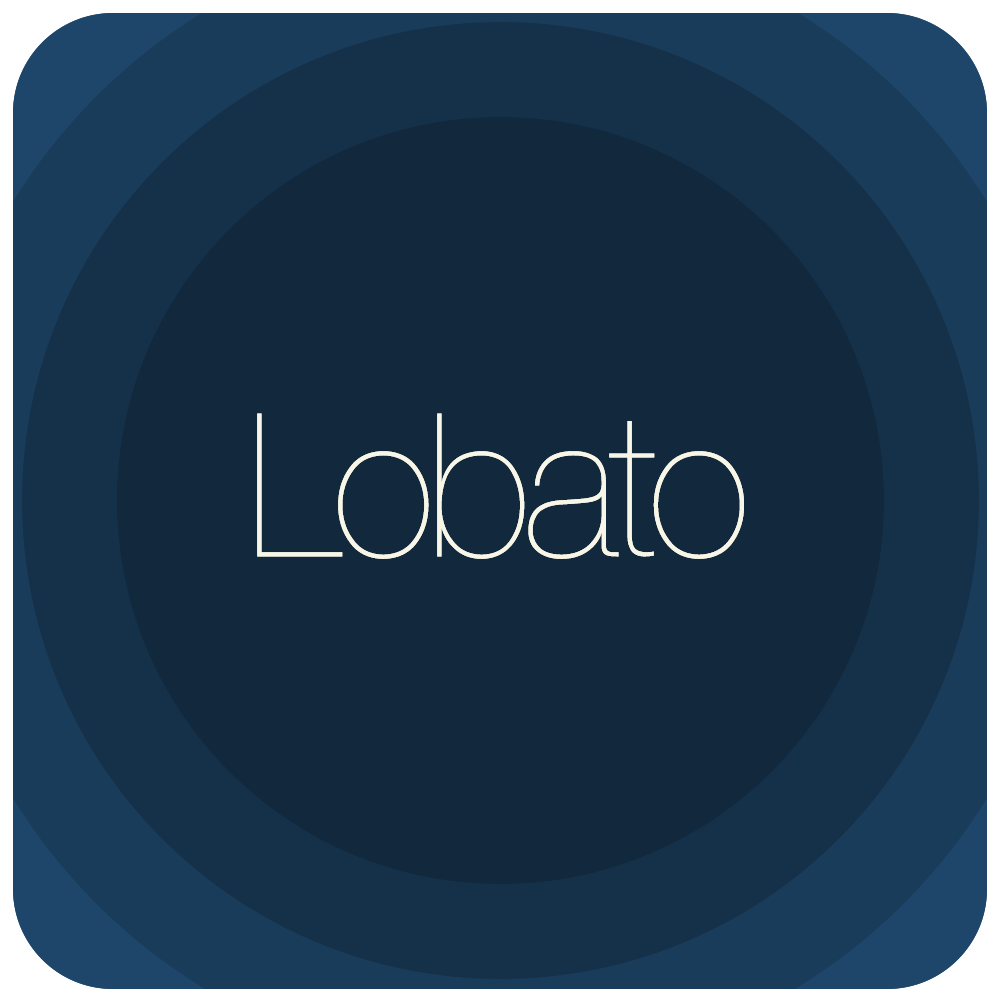
<style>
.page{position:relative;width:1000px;height:1000px;background:#11283d}
.page>*{position:absolute;margin:0}
.t1{font:200px "HelveticaNeue-UltraLight";letter-spacing:-0.05em;color:#f8f6e7}
</style>
<div class="page">
<p class="t1" style="left:257px;top:413px;width:487px;height:146px">Lobato</p>
</div>
